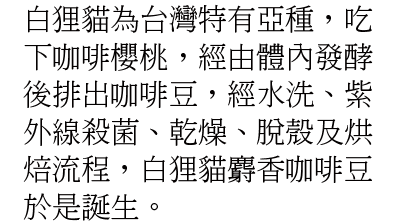
<style>
.page{position:relative;width:400px;height:224px;background:#ffffff}
.page>*{position:absolute;margin:0}
.t1{font:29.2px/37.5px "AdobeMingStd-Light";color:#030000}
</style>
<div class="page">
<p class="t1" style="left:23px;top:4px;width:350px;height:217px">白狸貓為台灣特有亞種，吃<br>下咖啡櫻桃，經由體內發酵<br>後排出咖啡豆，經水洗、紫<br>外線殺菌、乾燥、脫殼及烘<br>焙流程，白狸貓麝香咖啡豆<br>於是誕生。</p>
</div>
